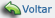
<style>
.page{position:relative;width:55px;height:18px;background:#eff0f1}
.page>*{position:absolute;margin:0}
.t1{font:10px "Verdana";color:#336ca1}
</style>
<div class="page">
<p class="t1" style="left:22px;top:5px;width:30px;height:8px">Voltar</p>
</div>
